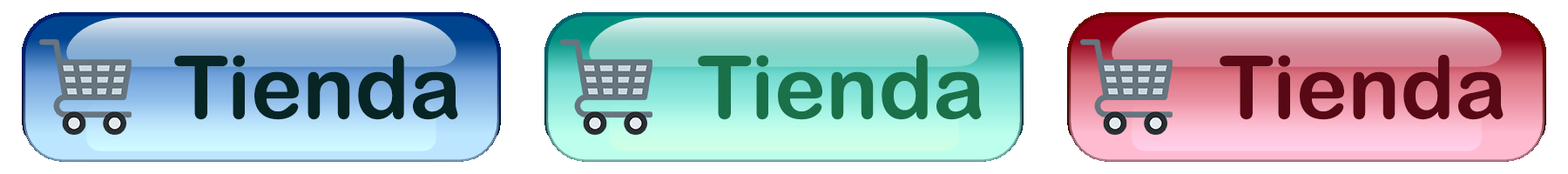
<style>
.page{position:relative;width:1568px;height:174px;background:#ffffff}
.page>*{position:absolute;margin:0}
.t1{font:87.1px "ArialRoundedMTBold";color:#062524}
.t2{font:87.1px "ArialRoundedMTBold";color:#1a7049}
.t3{font:87.1px "ArialRoundedMTBold";color:#590815}
</style>
<div class="page">
<p class="t1" style="left:174px;top:55px;width:284px;height:65px">Tienda</p>
<p class="t2" style="left:698px;top:55px;width:284px;height:65px">Tienda</p>
<p class="t3" style="left:1220px;top:55px;width:284px;height:65px">Tienda</p>
</div>
